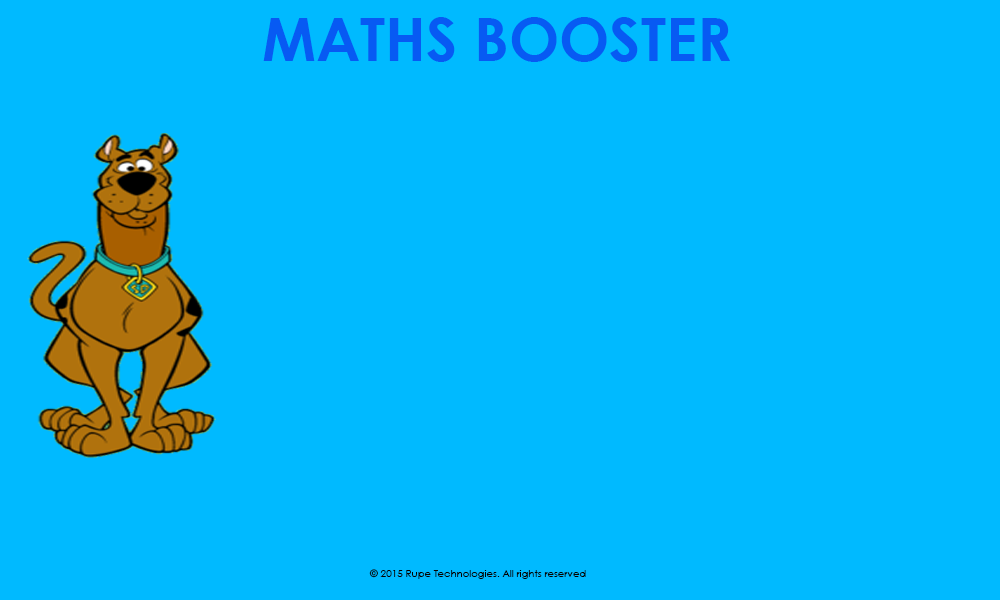
<style>
.page{position:relative;width:1000px;height:600px;background:#00baff}
.page>*{position:absolute;margin:0}
.t1{font:60px "CenturyGothic-Bold";color:#075af3}
.t2{font:10px "CenturyGothic";color:#050300}
</style>
<div class="page">
<p class="t1" style="left:263px;top:17px;width:467px;height:45px">MATHS BOOSTER</p>
<p class="t2" style="left:369px;top:569px;width:217px;height:10px">© 2015 Rupe Technologies. All rights reserved</p>
</div>
